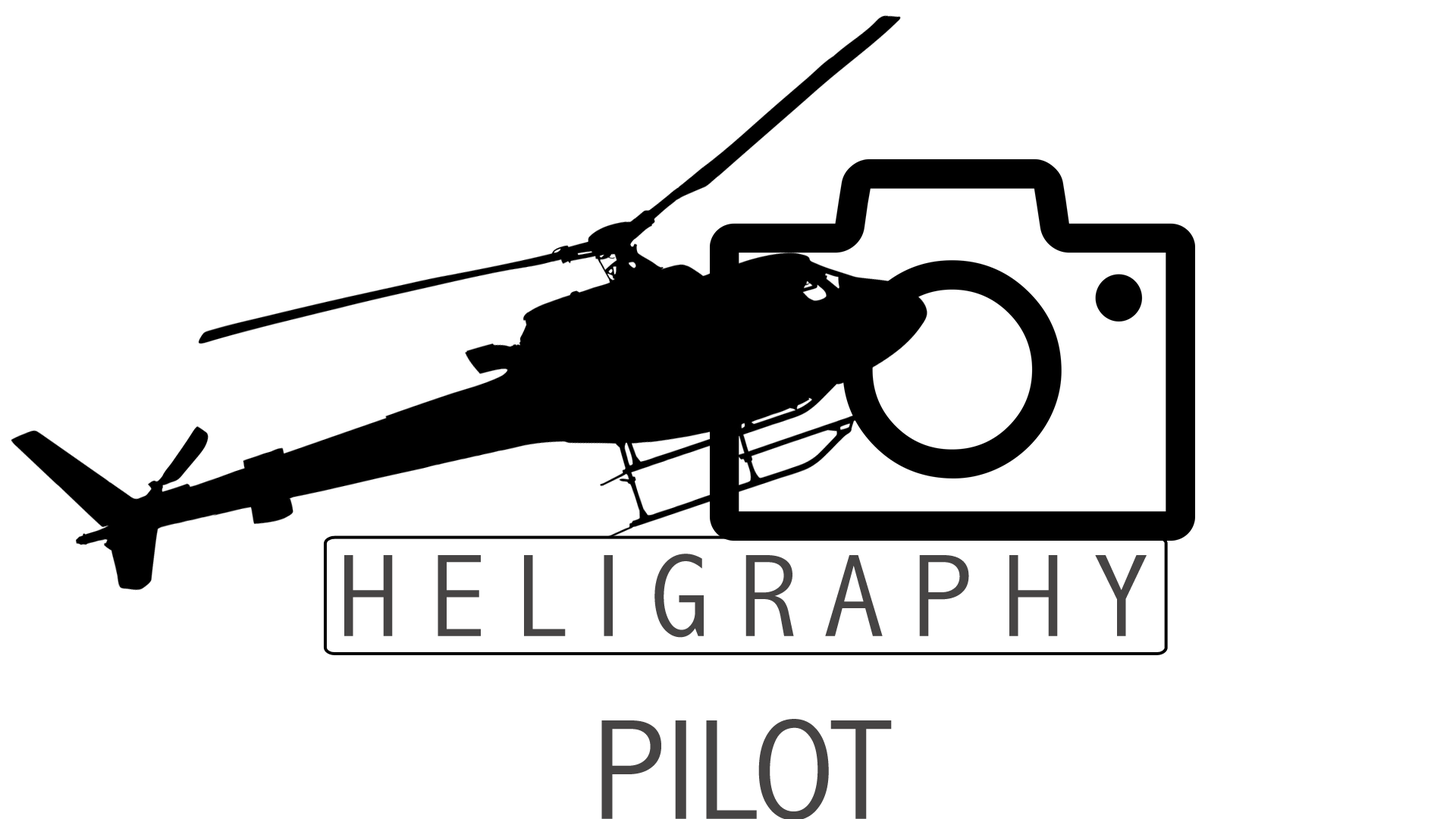
<style>
.page{position:relative;width:1456px;height:819px;background:#ffffff}
.page>*{position:absolute;margin:0}
.t1{font:118.5px "AbadiMT-CondensedLight";color:#464444;text-transform:uppercase;scale:1.08 1}
.t2{font:144.1px "AbadiMT-CondensedLight";color:#464444;text-transform:uppercase;scale:1.08 1}
</style>
<div class="page">
<p class="t1" style="left:344px;top:554px;width:803px;height:84px">H e l i g r a p h y</p>
<p class="t2" style="left:601px;top:719px;width:291px;height:102px">Pilot</p>
</div>
